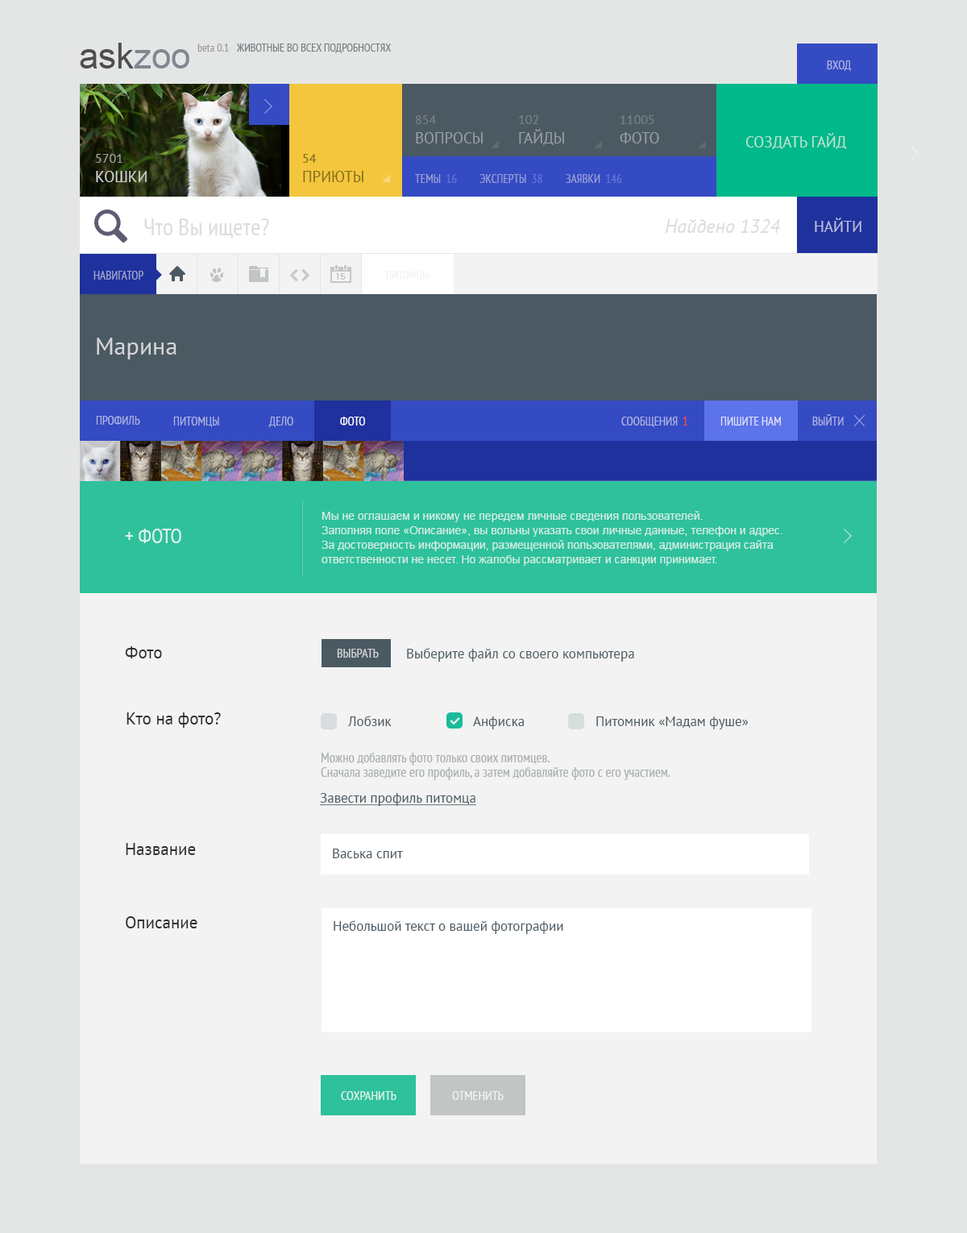
<style>
.page{position:relative;width:967px;height:1233px;background:#f2f3f2}
.page>*{position:absolute;margin:0}
.t1{font:12.1px "PTSans-Narrow";color:#aeb4e2;text-transform:uppercase}
.t2{font:12.1px "PTSans-Narrow";color:#9ea3cd;text-transform:uppercase}
.t3{font:11.3px "PTSans-Narrow";color:#f1f2f2;text-transform:uppercase}
.t4{font:24.2px "PTSans-Regular";color:#d4d6d8}
.t5{font:12.1px "PTSans-Narrow";color:#ffffff;text-transform:uppercase}
.t6{font:12.1px "PTSans-Narrow";color:#fd482e;text-transform:uppercase}
.t7{font:12.1px "PTSans-Narrow";color:#dfe3fa;text-transform:uppercase}
.t8{font:11.3px/14.5px "ArialMT";color:#d0eee4}
.t9{font:21px "PTSans-Narrow";color:#e0f3ed;text-transform:uppercase}
.t10{font:16.9px "PTSans-Regular";color:#313131}
.t11{font:12.9px "PTSans-Narrow";color:#d4d6d8;text-transform:uppercase}
.t12{font:13.7px "PTSans-Regular";color:#4b5962}
.t13{font:13.7px/14.5px "PTSans-Narrow";color:#abb0b3}
.t14{font:13.7px "PTSans-Regular";color:#4b5962;text-decoration:underline}
.t15{font:12.9px "PTSans-Narrow";color:#e0f3ed;text-transform:uppercase}
.t16{font:12.9px "PTSans-Narrow";color:#ffffff;text-transform:uppercase}
</style>
<div class="page">
<p class="t1" style="left:827px;top:60px;width:24px;height:11px">вход</p>
<p class="t2" style="left:93px;top:271px;width:50px;height:9px">навигатор</p>
<p class="t3" style="left:386px;top:271px;width:43px;height:9px">питомцы</p>
<p class="t4" style="left:97px;top:338px;width:79px;height:21px">Марина</p>
<p class="t1" style="left:96px;top:416px;width:44px;height:9px">профиль</p>
<p class="t1" style="left:173px;top:417px;width:46px;height:10px">питомцы</p>
<p class="t1" style="left:268px;top:417px;width:25px;height:10px">дело</p>
<p class="t5" style="left:340px;top:417px;width:25px;height:9px">фото</p>
<p class="t1" style="left:621px;top:417px;width:57px;height:10px">сообщения</p>
<p class="t6" style="left:683px;top:417px;width:4px;height:9px">1</p>
<p class="t7" style="left:720px;top:417px;width:61px;height:9px">пишите нам</p>
<p class="t1" style="left:812px;top:414px;width:32px;height:12px">выйти</p>
<p class="t8" style="left:322px;top:511px;width:461px;height:55px">Мы не оглашаем и никому не передем личные сведения пользователей. <br>Заполняя поле «Описание», вы вольны указать свои личные данные, телефон и адрес.<br>За достоверность информации, размещенной пользователями, администрация сайта ответственности не несет. Но жалобы рассматривает и санкции принимает.</p>
<p class="t9" style="left:125px;top:529px;width:56px;height:14px">+ фото</p>
<p class="t10" style="left:125px;top:646px;width:37px;height:12px">Фото</p>
<p class="t11" style="left:337px;top:649px;width:42px;height:9px">Выбрать</p>
<p class="t12" style="left:407px;top:648px;width:227px;height:14px">Выберите файл со своего компьютера</p>
<p class="t10" style="left:127px;top:712px;width:94px;height:16px">Кто на фото?</p>
<p class="t12" style="left:348px;top:716px;width:44px;height:10px">Лобзик</p>
<p class="t12" style="left:473px;top:716px;width:52px;height:13px">Анфиска</p>
<p class="t12" style="left:596px;top:716px;width:153px;height:13px">Питомник «Мадам фуше»</p>
<p class="t13" style="left:321px;top:753px;width:350px;height:27px">Можно добавлять фото только своих питомцев.<br>Сначала заведите его профиль, а затем добавляйте фото с его участием.</p>
<p class="t14" style="left:320px;top:793px;width:156px;height:13px">Завести профиль питомца</p>
<p class="t10" style="left:126px;top:843px;width:70px;height:12px">Название</p>
<p class="t12" style="left:333px;top:849px;width:70px;height:9px">Васька спит</p>
<p class="t10" style="left:126px;top:916px;width:71px;height:12px">Описание</p>
<p class="t12" style="left:334px;top:920px;width:229px;height:14px">Небольшой текст о вашей фотографии</p>
<p class="t15" style="left:341px;top:1091px;width:56px;height:9px">сохранить</p>
<p class="t16" style="left:452px;top:1091px;width:52px;height:9px;opacity:0.8">отменить</p>
</div>
